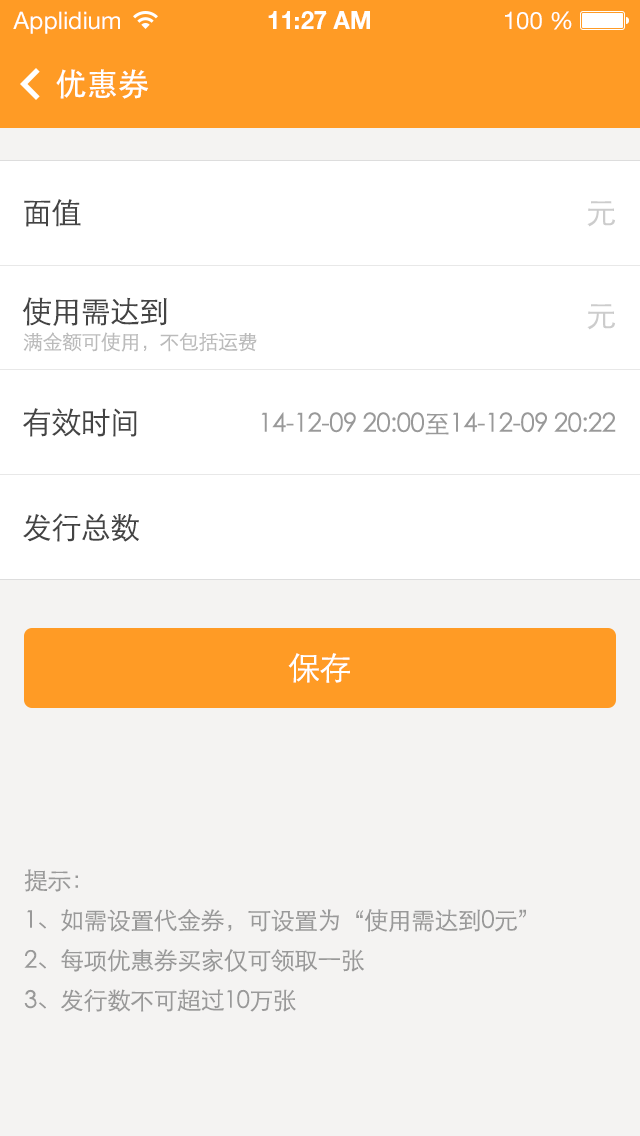
<style>
.page{position:relative;width:640px;height:1136px;background:#f4f3f2}
.page>*{position:absolute;margin:0}
.t1{font:32px "STHeiti";letter-spacing:-0.025em;color:#ffffff}
.t2{font:30px "STXihei";letter-spacing:-0.025em;color:#444444}
.t3{font:30px "STXihei";letter-spacing:-0.025em;color:#cccccc}
.t4{font:20px "STXihei";letter-spacing:-0.025em;color:#bbbbbb}
.t5{font:26px "STXihei";letter-spacing:-0.025em;color:#999999}
.t6{font:32px "STXihei";letter-spacing:-0.025em;color:#ffffff}
.t7{font:24px/40px "STXihei";letter-spacing:-0.025em;color:#999999}
</style>
<div class="page">
<p class="t1" style="left:56px;top:69px;width:93px;height:30px">优惠券</p>
<p class="t2" style="left:24px;top:199px;width:57px;height:28px">面值</p>
<p class="t3" style="left:587px;top:201px;width:28px;height:26px">元</p>
<p class="t2" style="left:22px;top:297px;width:145px;height:29px">使用需达到</p>
<p class="t3" style="left:587px;top:304px;width:28px;height:26px">元</p>
<p class="t4" style="left:23px;top:332px;width:234px;height:20px">满金额可使用，不包括运费</p>
<p class="t2" style="left:23px;top:408px;width:114px;height:29px">有效时间</p>
<p class="t5" style="left:261px;top:412px;width:355px;height:23px">14-12-09 20:00至14-12-09 20:22</p>
<p class="t2" style="left:23px;top:513px;width:116px;height:29px">发行总数</p>
<p class="t6" style="left:288px;top:653px;width:62px;height:30px">保存</p>
<p class="t7" style="left:24px;top:869px;width:502px;height:143px">提示：<br>1、如需设置代金券，可设置为“使用需达到0元”<br>2、每项优惠券买家仅可领取一张<br>3、发行数不可超过10万张</p>
</div>
